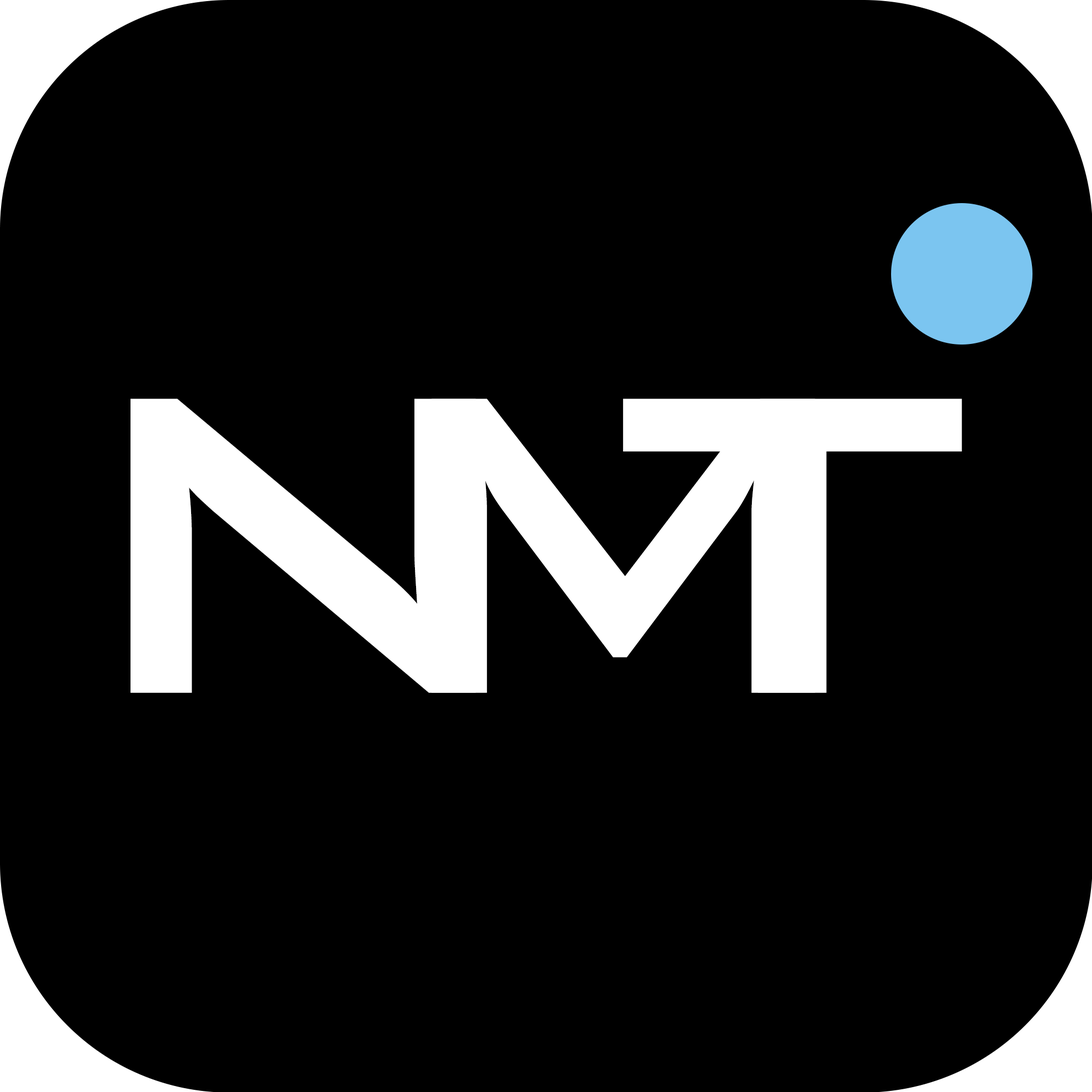
<style>
.page{position:relative;width:1092px;height:1092px;background:#000000}
.page>*{position:absolute;margin:0}
.t1{font:568.7px "BankGothicBT-Medium";letter-spacing:0.04em;color:#ffffff;text-transform:uppercase}
</style>
<div class="page">
<p class="t1" style="left:130px;top:399px;width:346px;height:294px">N</p>
<p class="t1" style="left:431px;top:399px;width:384px;height:294px">M</p>
<p class="t1" style="left:623px;top:399px;width:339px;height:294px">T</p>
</div>
